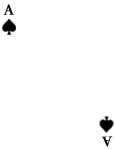
<style>
.page{position:relative;width:115px;height:150px;background:#ffffff}
.page>*{position:absolute;margin:0}
.t1{font:15.4px "Garamond-Bold";letter-spacing:-0.005em;color:#000000}
</style>
<div class="page">
<p class="t1" style="left:3px;top:4px;width:12px;height:11px">A</p>
<p class="t1" style="left:101px;top:136px;width:12px;height:11px;rotate:178deg">A</p>
</div>
